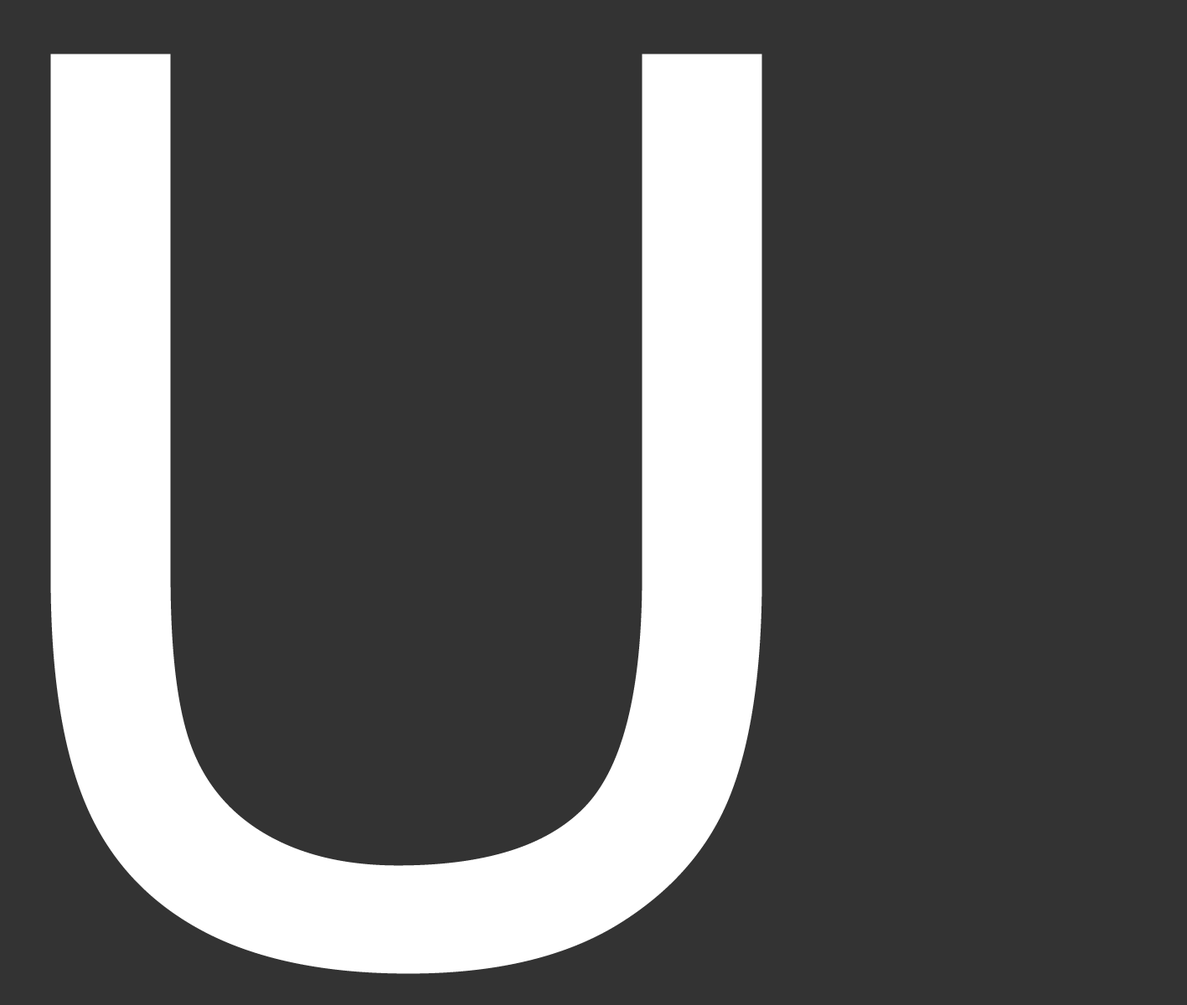
<style>
.page{position:relative;width:1187px;height:1005px;background:#333333}
.page>*{position:absolute;margin:0}
.t1{font:1262.6px "ArialMT";color:#ffffff}
</style>
<div class="page">
<p class="t1" style="left:50px;top:54px;width:712px;height:920px">U</p>
</div>
